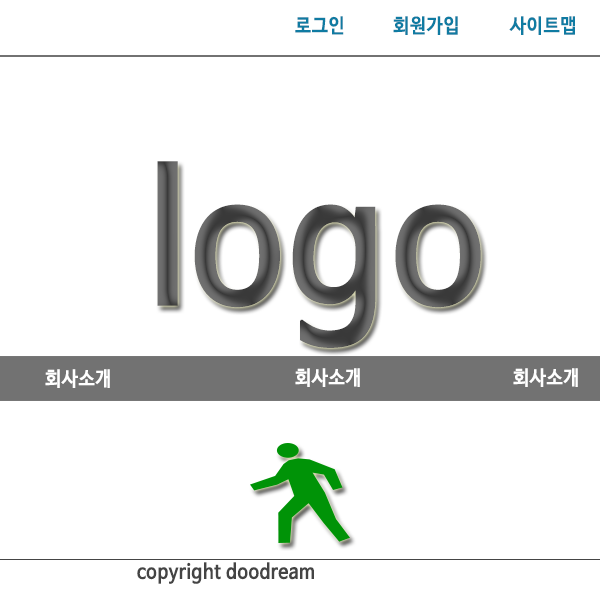
<style>
.page{position:relative;width:600px;height:600px;background:#ffffff}
.page>*{position:absolute;margin:0}
.t1{font:20px "NanumBarunGothicBold";letter-spacing:0.04em;color:#0f7ba2;scale:0.9 1}
.t2{font:174.1px "NanumBarunGothicBold";letter-spacing:0.04em;scale:0.93 1}
.t3{font:20px "NanumBarunGothicBold";letter-spacing:0.04em;color:#ffffff;scale:0.9 1}
.t4{font:20px "NanumBarunGothicBold";letter-spacing:0.04em;color:#444444;scale:0.9 1}
</style>
<div class="page">
<p class="t1" style="left:295px;top:16px;width:49px;height:19px">로그인</p>
<p class="t1" style="left:393px;top:16px;width:65px;height:19px">회원가입</p>
<p class="t1" style="left:509px;top:16px;width:66px;height:19px">사이트맵</p>
<p class="t2" style="left:157px;top:161px;width:324px;height:187px">logo</p>
<p class="t3" style="left:45px;top:369px;width:65px;height:19px">회사소개</p>
<p class="t3" style="left:295px;top:368px;width:65px;height:19px">회사소개</p>
<p class="t3" style="left:513px;top:368px;width:65px;height:19px">회사소개</p>
<p class="t4" style="left:137px;top:562px;width:177px;height:22px">copyright doodream</p>
</div>
